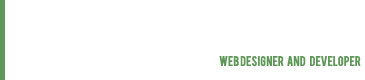
<style>
.page{position:relative;width:365px;height:80px;background:#ffffff}
.page>*{position:absolute;margin:0}
.t1{font:11px "Bebas";color:#5e9758}
</style>
<div class="page">
<p class="t1" style="left:219px;top:56px;width:142px;height:11px">web designer   and    developer</p>
</div>
